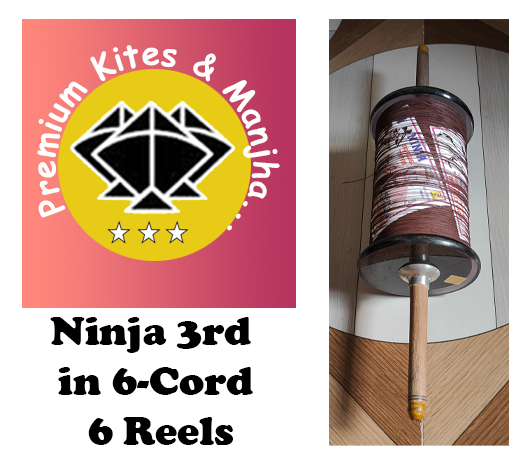
<style>
.page{position:relative;width:522px;height:462px;background:#ffffff}
.page>*{position:absolute;margin:0}
.t1{font:41.7px "CooperBlack";color:#000000}
</style>
<div class="page">
<p class="t1" style="left:50px;top:317px;width:203px;height:128px;text-align:center">Ninja 3rd <br>in 6-Cord<br> 6 Reels</p>
</div>
